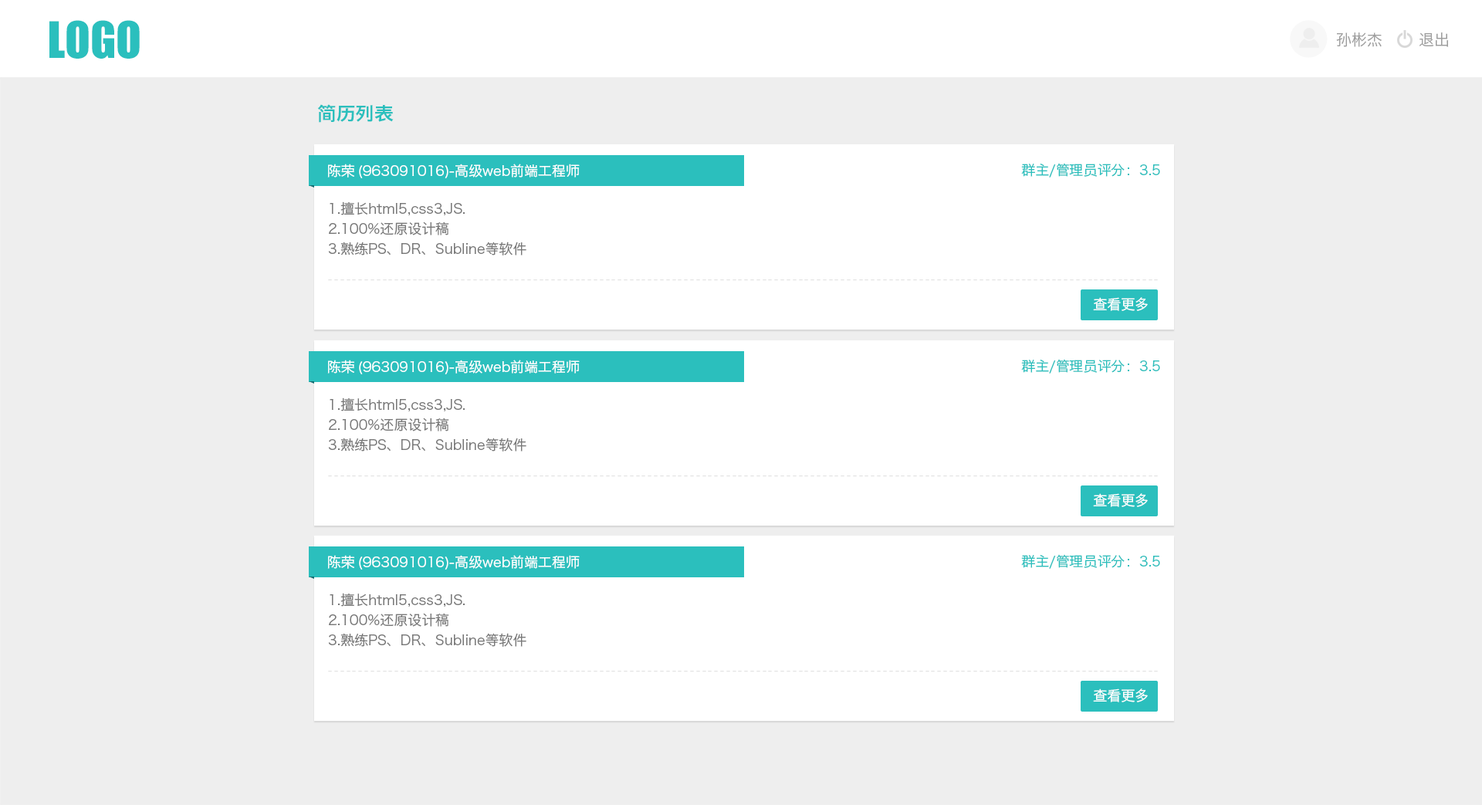
<style>
.page{position:relative;width:1482px;height:805px;background:#eeeeee}
.page>*{position:absolute;margin:0}
.t1{font:46.3px "Impact";color:#2bbfbd;text-transform:uppercase}
.t2{font:15.4px "HiraginoSansGB-W3";color:#9e9e9e}
.t3{font:18.5px "HiraginoSansGB-W6";color:#2bbfbd}
.t4{font:13.9px "HiraginoSansGB-W3";color:#ffffff}
.t5{font:13.9px "HiraginoSansGB-W3";color:#2bbfbd}
.t6{font:13.9px/20.1px "HiraginoSansGB-W3";color:#787878}
.t7{font:10.8px "HiraginoSansGB-W3";letter-spacing:0.2em;color:#e3e3e3}
</style>
<div class="page">
<p class="t1" style="left:49px;top:20px;width:91px;height:39px">logo</p>
<p class="t2" style="left:1336px;top:32px;width:45px;height:15px">孙彬杰</p>
<p class="t2" style="left:1419px;top:32px;width:29px;height:15px">退出</p>
<p class="t3" style="left:317px;top:104px;width:77px;height:19px">简历列表</p>
<p class="t4" style="left:327px;top:164px;width:27px;height:13px">陈荣</p>
<p class="t4" style="left:359px;top:164px;width:221px;height:14px">(963091016)-高级web前端工程师</p>
<p class="t5" style="left:1021px;top:163px;width:139px;height:14px">群主/管理员评分：3.5</p>
<p class="t6" style="left:328px;top:201px;width:198px;height:54px">1.擅长html5,css3,JS.<br>2.100%还原设计稿<br>3.熟练PS、DR、Subline等软件</p>
<p class="t7" style="left:328px;top:279px;width:829px;height:2px">------------------------------------------------------------------------------------------------------------------------------------------</p>
<p class="t4" style="left:1093px;top:297px;width:54px;height:14px">查看更多</p>
<p class="t4" style="left:327px;top:360px;width:27px;height:13px">陈荣</p>
<p class="t4" style="left:359px;top:360px;width:221px;height:14px">(963091016)-高级web前端工程师</p>
<p class="t5" style="left:1021px;top:359px;width:139px;height:14px">群主/管理员评分：3.5</p>
<p class="t6" style="left:328px;top:397px;width:198px;height:54px">1.擅长html5,css3,JS.<br>2.100%还原设计稿<br>3.熟练PS、DR、Subline等软件</p>
<p class="t7" style="left:328px;top:475px;width:829px;height:2px">------------------------------------------------------------------------------------------------------------------------------------------</p>
<p class="t4" style="left:1093px;top:493px;width:54px;height:14px">查看更多</p>
<p class="t4" style="left:327px;top:555px;width:27px;height:14px">陈荣</p>
<p class="t4" style="left:359px;top:555px;width:221px;height:14px">(963091016)-高级web前端工程师</p>
<p class="t5" style="left:1021px;top:554px;width:139px;height:15px">群主/管理员评分：3.5</p>
<p class="t6" style="left:328px;top:593px;width:198px;height:54px">1.擅长html5,css3,JS.<br>2.100%还原设计稿<br>3.熟练PS、DR、Subline等软件</p>
<p class="t7" style="left:328px;top:671px;width:829px;height:1px">------------------------------------------------------------------------------------------------------------------------------------------</p>
<p class="t4" style="left:1093px;top:688px;width:54px;height:14px">查看更多</p>
</div>
